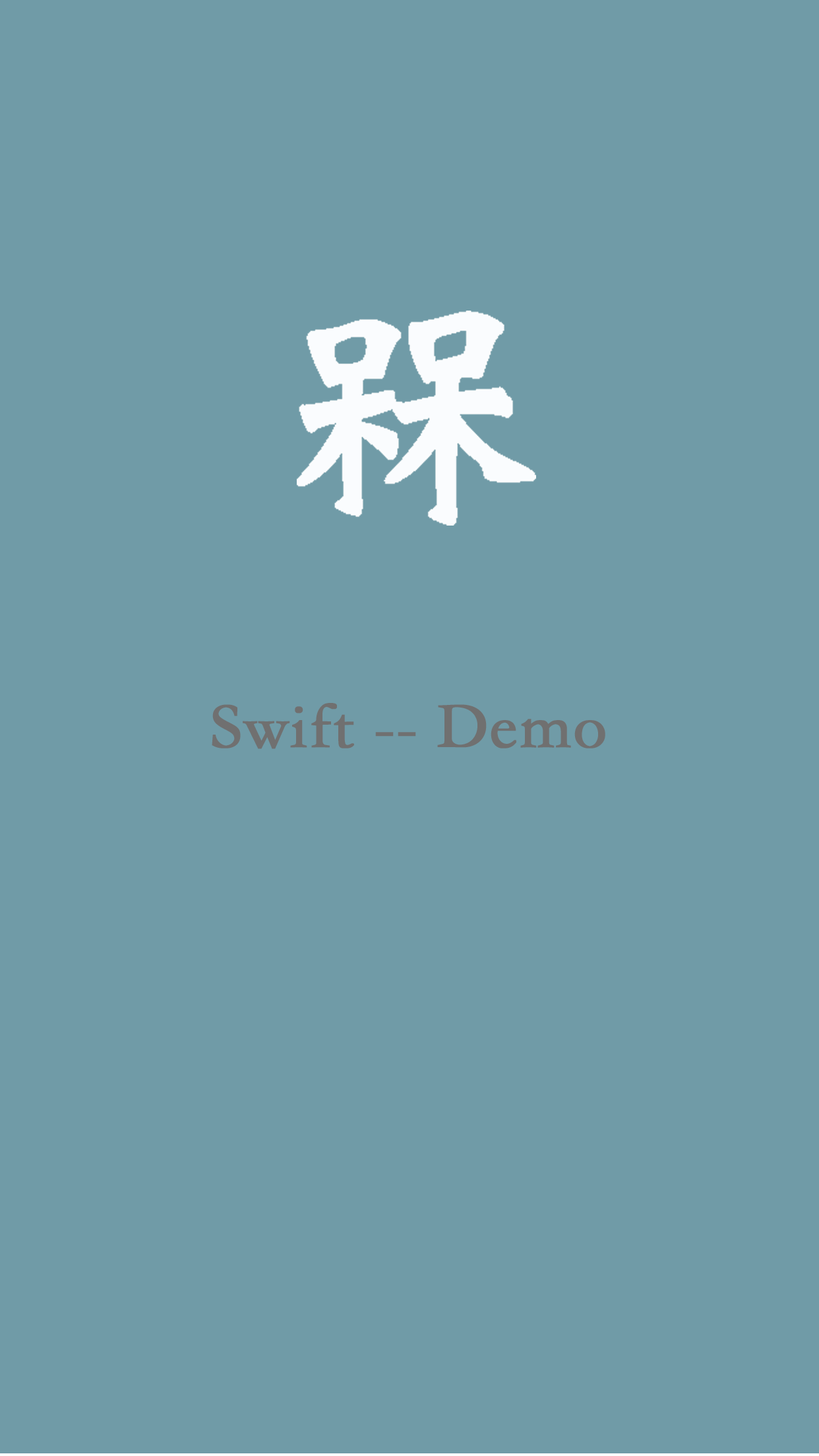
<style>
.page{position:relative;width:819px;height:1456px;background:#709ba7}
.page>*{position:absolute;margin:0}
.t1{font:65.9px "STSongti-SC-Regular";color:#707070;font-weight:bold}
</style>
<div class="page">
<p class="t1" style="left:212px;top:703px;width:393px;height:46px">Swift -- Demo</p>
</div>
